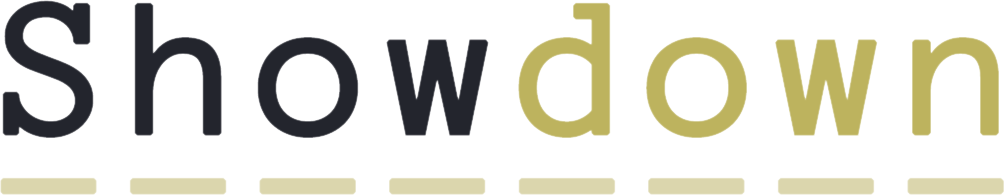
<style>
.page{position:relative;width:1004px;height:195px;background:#ffffff}
.page>*{position:absolute;margin:0}
.t1{font:200px/100px "AnonymousPro";letter-spacing:0.075em;color:#dbd6ad;font-weight:bold}
.t2{font:200px/100px "AnonymousPro";letter-spacing:0.075em;color:#23252d;font-weight:bold}
.t3{font:200px/100px "AnonymousPro";letter-spacing:0.075em;color:#bdb35e;font-weight:bold}
</style>
<div class="page">
<p class="t1" style="left:0px;top:0px;width:1004px;height:195px"><span class="t2">Show</span><span class="t3">down<br></span>--------</p>
</div>
